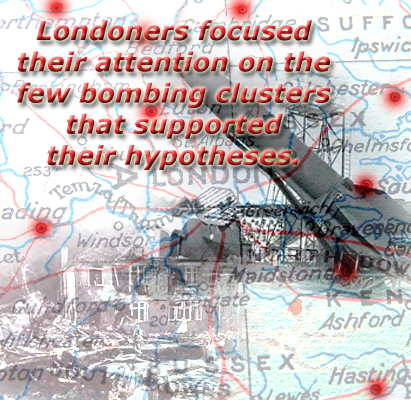
<style>
.page{position:relative;width:411px;height:400px}
.page>*{position:absolute;margin:0}
.t1{font:26px "Verdana-BoldItalic"}
</style>
<div class="page">
<p class="t1" style="left:17px;top:20px;width:314px;height:150px;text-align:center">Londoners focused <br>their attention on the <br>few bombing clusters <br>that supported <br>their hypotheses.</p>
</div>
